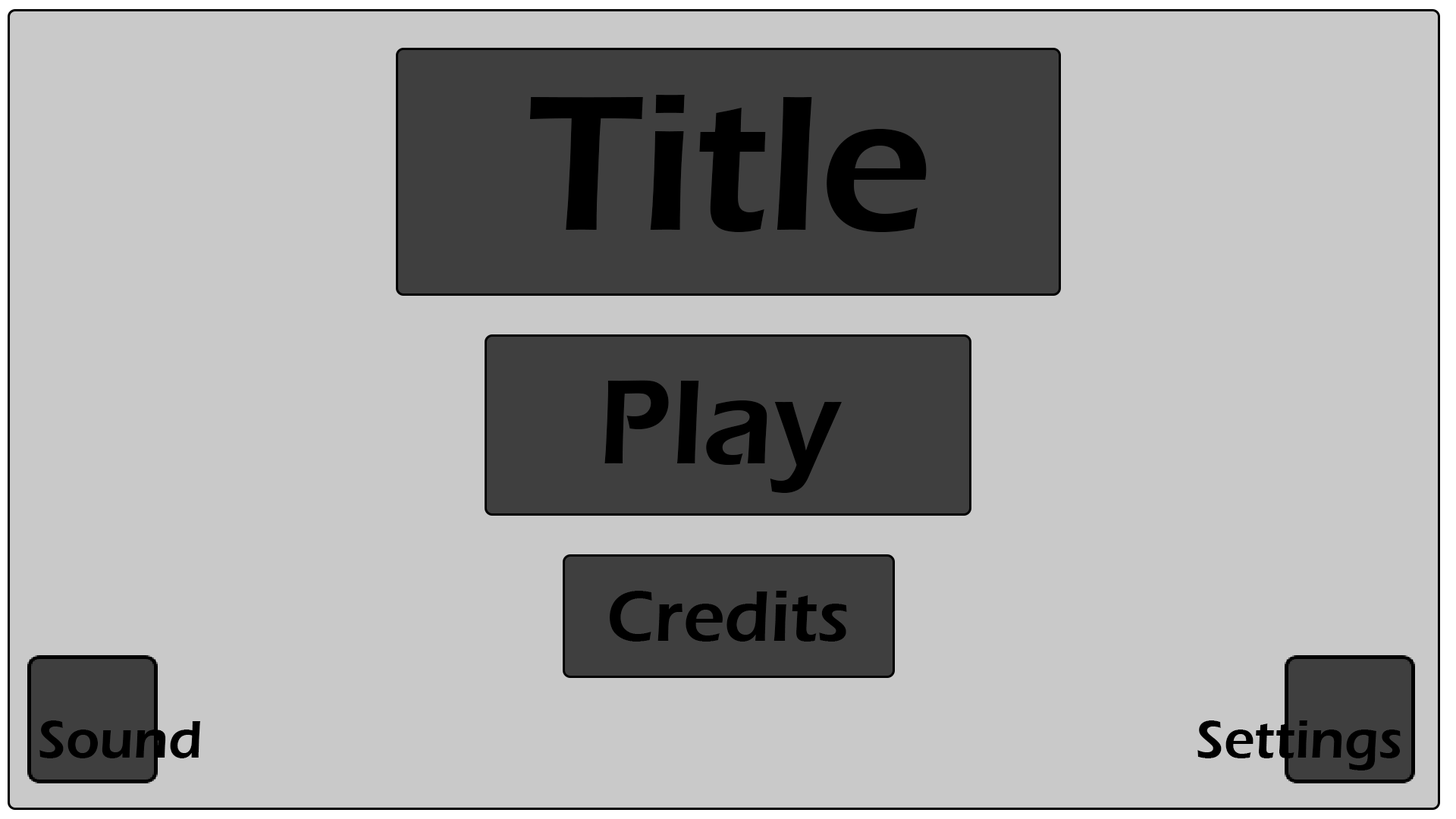
<style>
.page{position:relative;width:1456px;height:819px;background:#c9c9c9}
.page>*{position:absolute;margin:0}
.t1{font:198.4px "ErasITC-Demi";color:#000000}
.t2{font:123.7px "ErasITC-Demi";color:#000000}
.t3{font:73.5px "ErasITC-Demi";color:#000000}
.t4{font:54.6px "ErasITC-Demi";color:#000000}
</style>
<div class="page">
<p class="t1" style="left:529px;top:95px;width:398px;height:137px">Title</p>
<p class="t2" style="left:604px;top:380px;width:238px;height:113px">Play</p>
<p class="t3" style="left:610px;top:591px;width:237px;height:51px">Credits</p>
<p class="t4" style="left:39px;top:720px;width:161px;height:38px">Sound</p>
<p class="t4" style="left:1197px;top:720px;width:204px;height:50px">Settings</p>
</div>
